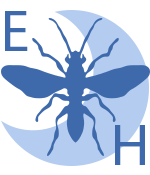
<style>
.page{position:relative;width:150px;height:175px;background:#ffffff}
.page>*{position:absolute;margin:0}
.t1{font:58.3px "MyriadPro-Regular";color:#3e6aab}
</style>
<div class="page">
<p class="t1" style="left:5px;top:11px;width:23px;height:40px">E</p>
<p class="t1" style="left:115px;top:125px;width:30px;height:40px">H</p>
</div>
